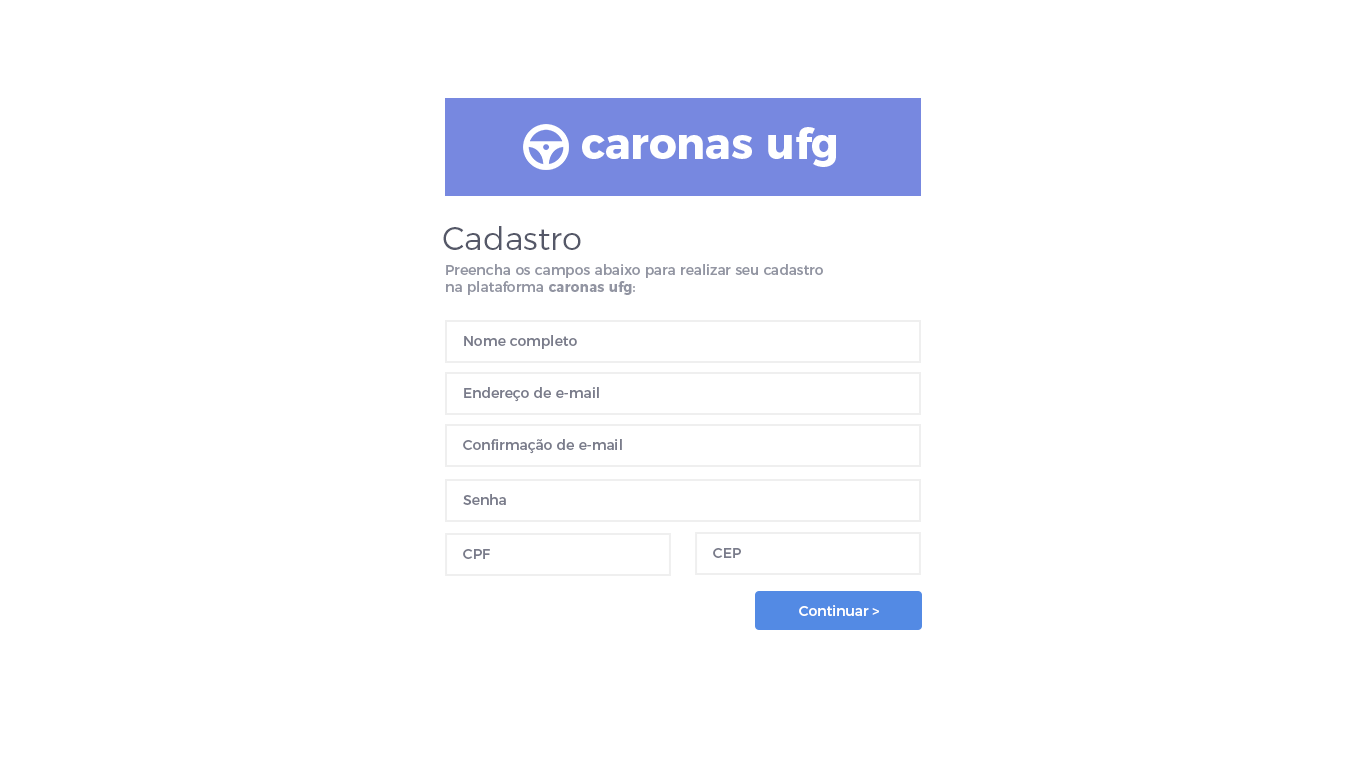
<style>
.page{position:relative;width:1366px;height:768px;background:#ffffff}
.page>*{position:absolute;margin:0}
.t1{font:43px "Montserrat-Bold";color:#ffffff}
.t2{font:32px "Montserrat-Light";color:#555868}
.t3{font:14px "Montserrat-Regular";color:#9295a2}
.t4{font:14px "Montserrat-Bold";color:#9295a2}
.t5{font:14px "Montserrat-Regular";color:#7a7c8b}
.t6{font:14px "Montserrat-Regular";color:#ffffff}
</style>
<div class="page">
<p class="t1" style="left:582px;top:127px;width:254px;height:40px">caronas ufg</p>
<p class="t2" style="left:443px;top:226px;width:138px;height:24px">Cadastro</p>
<p class="t3" style="left:446px;top:264px;width:377px;height:31px">Preencha os campos abaixo para realizar seu cadastro <br>na plataforma<span class="t4"> caronas ufg</span>:</p>
<p class="t5" style="left:464px;top:335px;width:113px;height:14px">Nome completo</p>
<p class="t5" style="left:464px;top:387px;width:135px;height:15px">Endereço de e-mail</p>
<p class="t5" style="left:463px;top:439px;width:159px;height:15px">Confirmação de e-mail</p>
<p class="t5" style="left:463px;top:494px;width:43px;height:11px">Senha</p>
<p class="t5" style="left:463px;top:549px;width:27px;height:10px">CPF</p>
<p class="t5" style="left:713px;top:548px;width:28px;height:10px">CEP</p>
<p class="t6" style="left:799px;top:605px;width:80px;height:11px">Continuar &gt;</p>
</div>
